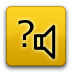
<style>
.page{position:relative;width:72px;height:72px}
.page>*{position:absolute;margin:0}
.t1{font:36px "Meiryo";color:#000000}
</style>
<div class="page">
<p class="t1" style="left:18px;top:20px;width:16px;height:27px">?</p>
</div>
